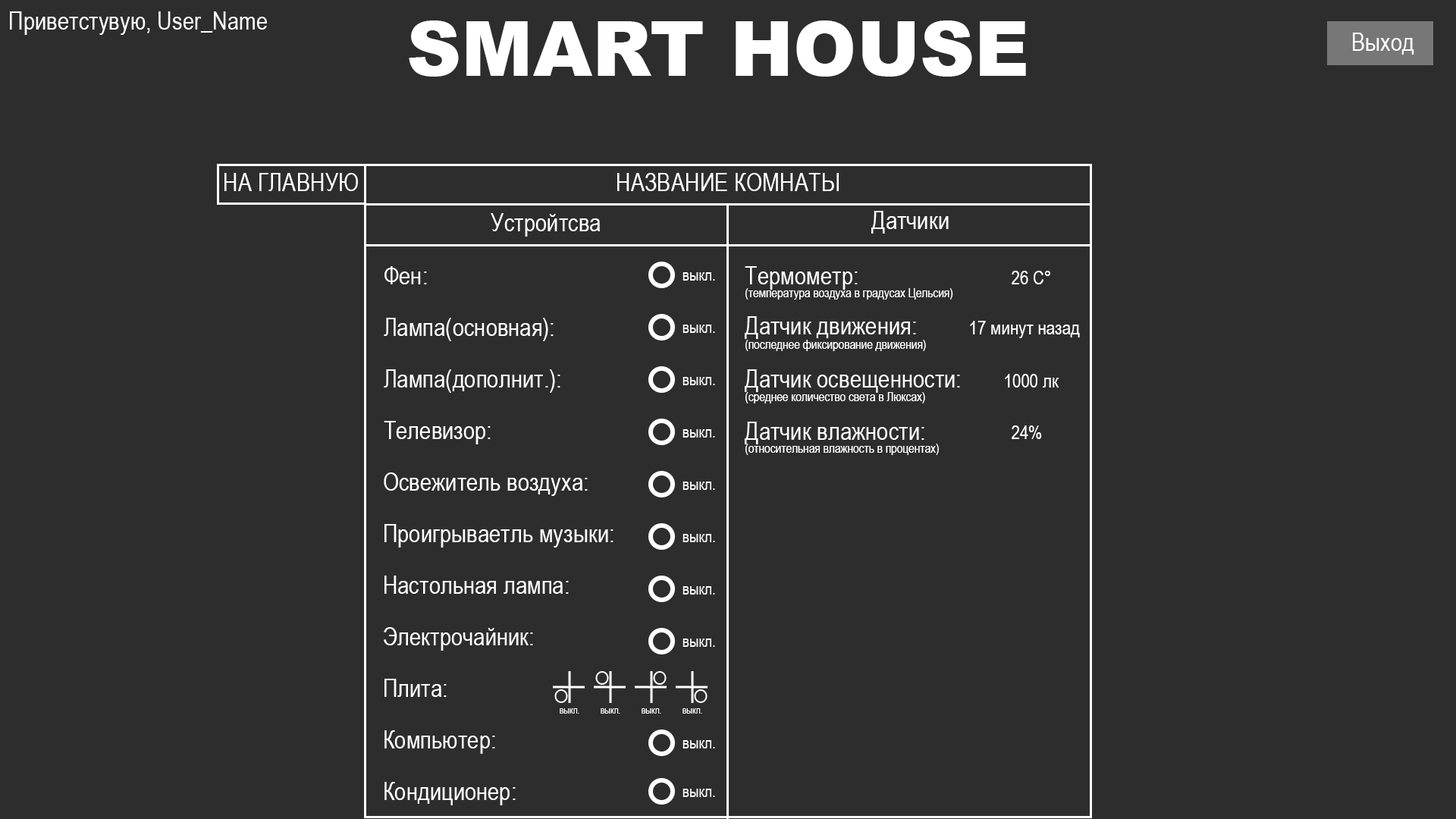
<style>
.page{position:relative;width:1456px;height:819px;background:#2d2d2d}
.page>*{position:absolute;margin:0}
.t1{font:25.3px "ArialNarrow";color:#ffffff}
.t2{font:75.8px "Arial-Black";color:#ffffff}
.t3{font:25.3px "ArialNarrow";color:#ffffff;text-transform:uppercase}
.t4{font:19px "ArialNarrow";color:#ffffff}
.t5{font:12.6px "ArialNarrow";color:#ffffff}
</style>
<div class="page">
<p class="t1" style="left:10px;top:11px;width:257px;height:24px">Приветстувую, User_Name</p>
<p class="t2" style="left:409px;top:20px;width:617px;height:57px">SMART HOUSE</p>
<p class="t1" style="left:1353px;top:33px;width:61px;height:22px">Выход</p>
<p class="t3" style="left:224px;top:173px;width:134px;height:18px">на главную</p>
<p class="t1" style="left:617px;top:173px;width:222px;height:18px">НАЗВАНИЕ КОМНАТЫ</p>
<p class="t1" style="left:491px;top:213px;width:109px;height:24px">Устройтсва</p>
<p class="t1" style="left:871px;top:211px;width:78px;height:23px">Датчики</p>
<p class="t1" style="left:384px;top:266px;width:43px;height:18px">Фен:</p>
<p class="t1" style="left:745px;top:266px;width:113px;height:24px">Термометр:</p>
<p class="t4" style="left:1012px;top:271px;width:38px;height:13px">26 С°</p>
<p class="t5" style="left:745px;top:288px;width:208px;height:12px">(температура воздуха в градусах Цельсия)</p>
<p class="t1" style="left:384px;top:318px;width:170px;height:23px">Лампа(основная):</p>
<p class="t1" style="left:745px;top:316px;width:171px;height:23px">Датчик движения:</p>
<p class="t4" style="left:970px;top:321px;width:110px;height:17px">17 минут назад</p>
<p class="t5" style="left:745px;top:340px;width:181px;height:11px">(последнее фиксирование движения)</p>
<p class="t1" style="left:384px;top:369px;width:176px;height:24px">Лампа(дополнит.):</p>
<p class="t1" style="left:745px;top:369px;width:215px;height:24px">Датчик освещенности:</p>
<p class="t4" style="left:1005px;top:374px;width:54px;height:14px">1000 лк</p>
<p class="t5" style="left:745px;top:392px;width:180px;height:11px">(среднее количество света в Люксах)</p>
<p class="t1" style="left:384px;top:421px;width:107px;height:23px">Телевизор:</p>
<p class="t1" style="left:745px;top:422px;width:179px;height:22px">Датчик влажности:</p>
<p class="t4" style="left:1012px;top:425px;width:30px;height:14px">24%</p>
<p class="t5" style="left:745px;top:444px;width:194px;height:11px">(относительная влажность в процентах)</p>
<p class="t1" style="left:384px;top:472px;width:204px;height:24px">Освежитель воздуха:</p>
<p class="t1" style="left:384px;top:524px;width:229px;height:24px">Проигрываетль музыки:</p>
<p class="t1" style="left:384px;top:576px;width:185px;height:18px">Настольная лампа:</p>
<p class="t1" style="left:384px;top:627px;width:149px;height:24px">Электрочайник:</p>
<p class="t1" style="left:384px;top:679px;width:63px;height:18px">Плита:</p>
<p class="t1" style="left:384px;top:730px;width:111px;height:24px">Компьютер:</p>
<p class="t1" style="left:384px;top:782px;width:132px;height:23px">Кондиционер:</p>
</div>
